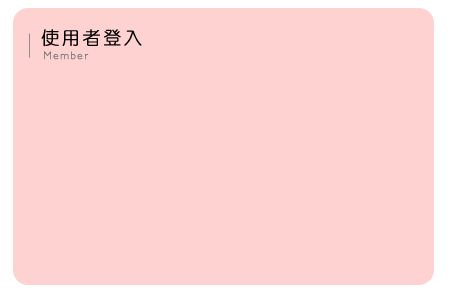
<style>
.page{position:relative;width:450px;height:300px;background:#ffd2d2}
.page>*{position:absolute;margin:0}
.t1{font:18px "DFYuan-Lt-HK-BF";letter-spacing:0.12em;color:#000000;font-weight:bold}
.t2{font:11px "Humanist521BT-Light";letter-spacing:0.12em;color:#707070;font-weight:bold}
</style>
<div class="page">
<p class="t1" style="left:41px;top:29px;width:101px;height:18px">使用者登入</p>
<p class="t2" style="left:44px;top:51px;width:45px;height:9px">Member</p>
</div>
